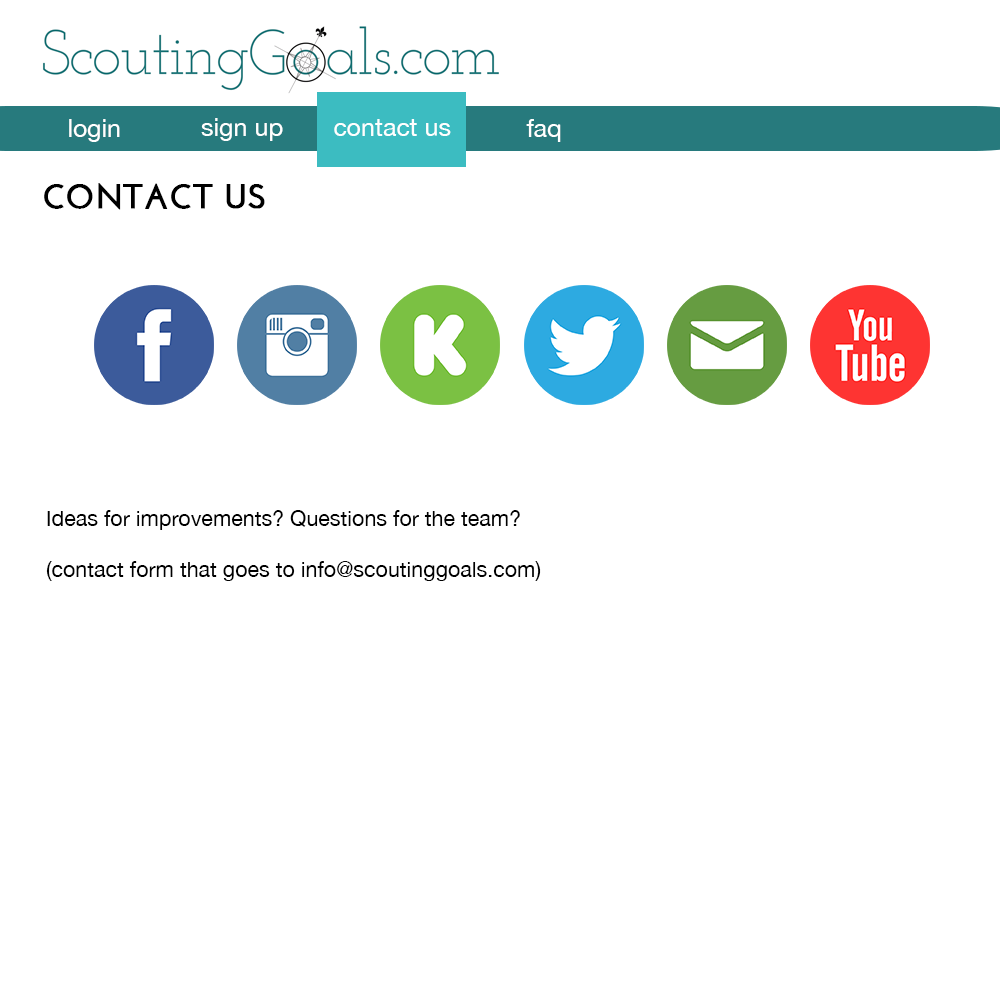
<style>
.page{position:relative;width:1000px;height:1000px;background:#ffffff}
.page>*{position:absolute;margin:0}
.t1{font:25px "HelveticaNeue";color:#ffffff}
.t2{font:34px "JosefinSans-Bold";color:#000000;text-transform:uppercase;font-weight:bold}
.t3{font:21.5px "HelveticaNeue";color:#000000}
</style>
<div class="page">
<p class="t1" style="left:69px;top:119px;width:51px;height:23px">login</p>
<p class="t1" style="left:201px;top:118px;width:82px;height:23px">sign up</p>
<p class="t1" style="left:334px;top:119px;width:117px;height:17px">contact us</p>
<p class="t1" style="left:526px;top:119px;width:35px;height:23px">faq</p>
<p class="t2" style="left:44px;top:183px;width:221px;height:27px">CONTACT US</p>
<p class="t3" style="left:46px;top:510px;width:495px;height:71px;text-align:justify">Ideas for improvements? Questions for the team?<br><br>(contact form that goes to info@scoutinggoals.com)</p>
</div>
